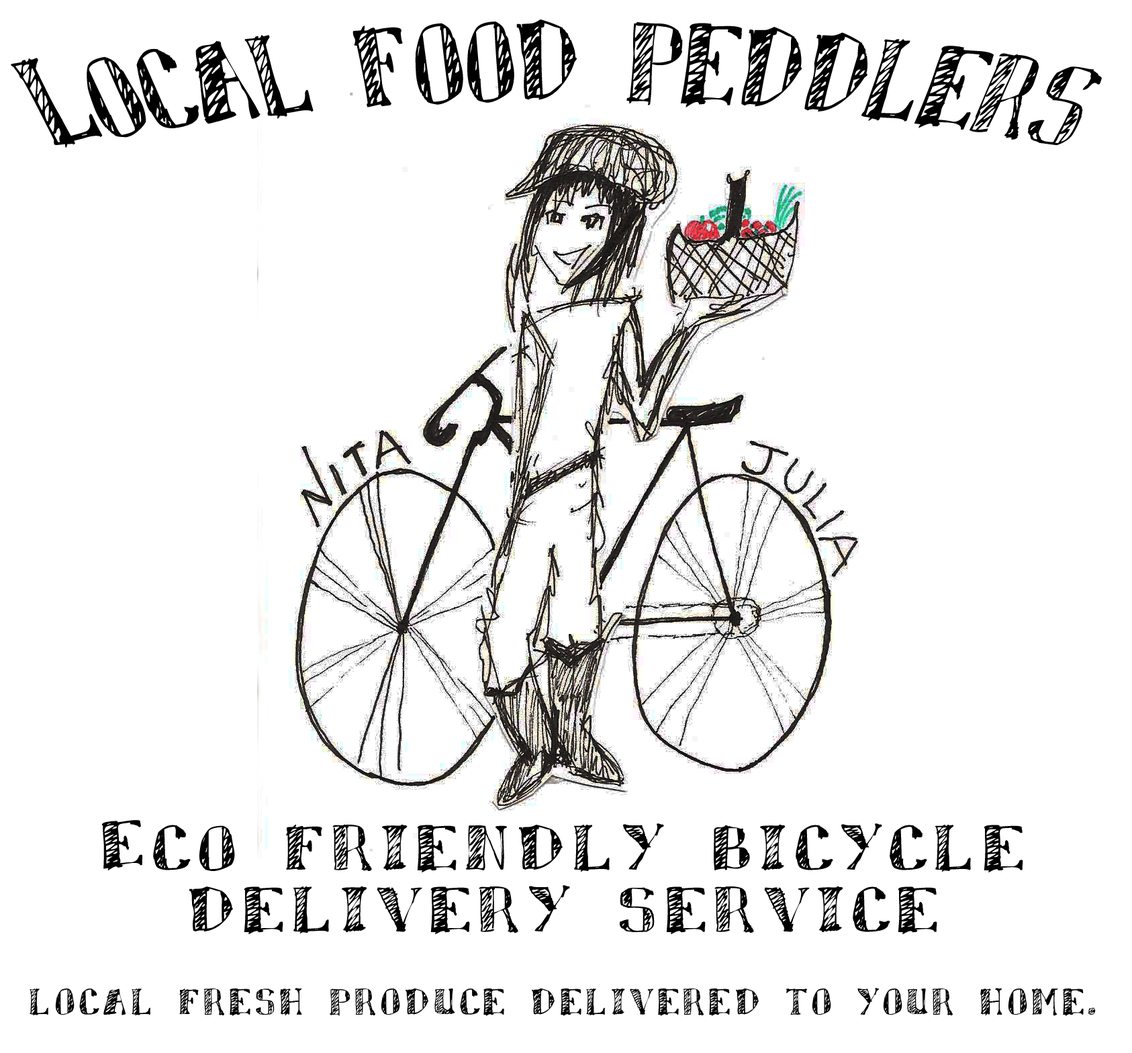
<style>
.page{position:relative;width:1132px;height:1053px;background:#ffffff}
.page>*{position:absolute;margin:0}
.t1{font:116.1px "Sketchy-Regular";color:#000000;scale:0.79 1}
.t2{font:67px/61.6px "Sketchy-Regular";letter-spacing:0.1em;color:#000000;scale:1.04 1}
.t3{font:38.8px "Sketchy-Regular";letter-spacing:0.1em;color:#000000;scale:0.94 1}
</style>
<div class="page">
<p class="t1" style="left:11px;top:19px;width:1091px;height:129px">Local food peddlers</p>
<p class="t2" style="left:101px;top:820px;width:923px;height:114px;text-align:center">Eco friendly bicycle delivery service</p>
<p class="t3" style="left:30px;top:988px;width:1066px;height:28px">local fresh produce delivered to your home.</p>
</div>
